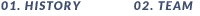
<style>
.page{position:relative;width:200px;height:16px;background:#ffffff}
.page>*{position:absolute;margin:0}
.t1{font:12px "Lato-BlackItalic";letter-spacing:0.1em;color:#414f6b;text-transform:uppercase}
</style>
<div class="page">
<p class="t1" style="left:1px;top:1px;width:192px;height:9px">01. history               02. team</p>
</div>
